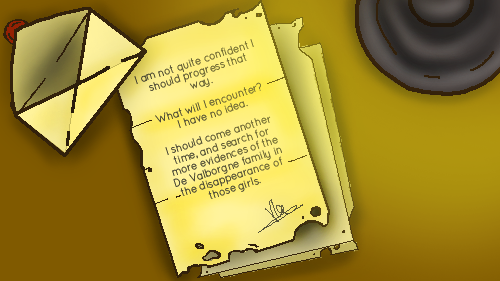
<style>
.page{position:relative;width:500px;height:281px}
.page>*{position:absolute;margin:0}
.t1{font:11px/11px "QuicksandLight-Regular";letter-spacing:-0.025em;color:#5f5b38;font-weight:bold;scale:0.9 1}
.t2{font:10px/11px "QuicksandLight-Regular";letter-spacing:-0.025em;color:#5f5b38;font-weight:bold;scale:0.9 1}
</style>
<div class="page">
<p class="t1" style="left:134px;top:39px;width:149px;height:160px;text-align:center;rotate:-18deg"><span class="t2"><br></span>I am not quite confident I should progress that way.<br><br> What will I encounter?<br> I have no idea. <br><br>I should come another time, and search for more evidences of the De Valborgne family in the disappearance of those girls.</p>
</div>
